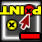
<style>
.page{position:relative;width:42px;height:42px}
.page>*{position:absolute;margin:0}
.t1{font:11.2px "Arial-Black";letter-spacing:-0.075em;color:#fdff00;scale:1.25 1}
.t2{font:11.2px "Arial-Black";letter-spacing:-0.075em;color:#ffff00;scale:1.25 1}
.t3{font:6.4px "Arial-Black";letter-spacing:-0.075em;color:#000000;scale:1.25 1}
.t4{font:28.8px "Arial-Black";letter-spacing:-0.075em;color:#ff0000;scale:2.2 1}
</style>
<div class="page">
<p class="t1" style="left:0px;top:6px;width:24px;height:9px;rotate:-180deg">INT</p>
<p class="t2" style="left:32px;top:6px;width:9px;height:9px;rotate:-180deg">P</p>
<p class="t3" style="left:25px;top:8px;width:7px;height:6px;rotate:-180deg">X</p>
<p class="t3" style="left:8px;top:22px;width:7px;height:6px;rotate:-180deg">X</p>
<p class="t4" style="left:21px;top:34px;width:19px;height:5px;rotate:-180deg">-</p>
</div>
